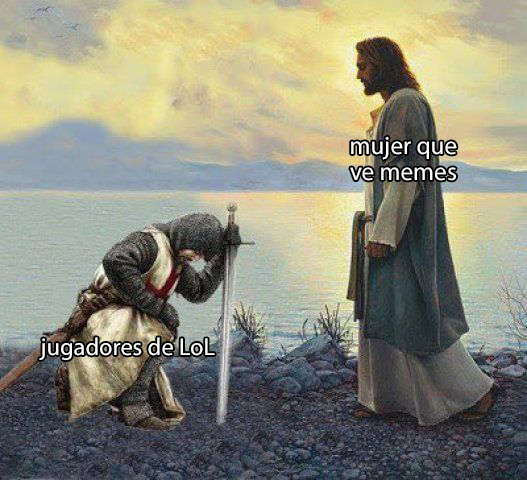
<style>
.page{position:relative;width:527px;height:480px}
.page>*{position:absolute;margin:0}
.t1{font:25.2px "MyriadPro-Regular";color:#ffffff}
.t2{font:24.5px "MyriadPro-Regular";color:#ffffff}
</style>
<div class="page">
<p class="t1" style="left:350px;top:137px;width:107px;height:44px;text-align:center">mujer que<br>ve memes</p>
<p class="t2" style="left:39px;top:337px;width:176px;height:23px">jugadores de LoL</p>
</div>
